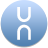
<style>
.page{position:relative;width:48px;height:48px;background:#ffffff}
.page>*{position:absolute;margin:0}
.t1{font:52.4px "AppleSymbols";color:#ffffff}
</style>
<div class="page">
<p class="t1" style="left:17px;top:7px;width:14px;height:33px">⩆</p>
</div>
